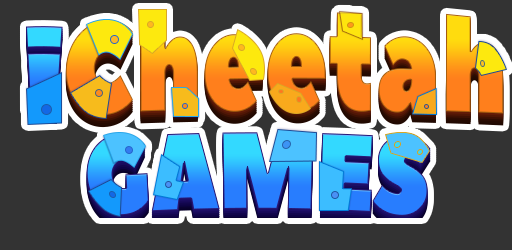
<style>
.page{position:relative;width:512px;height:250px;background:#333333}
.page>*{position:absolute;margin:0}
.t1{font:123.7px "PeaceSans";scale:0.83 1}
.t2{font:109.7px "PeaceSans";letter-spacing:-0.025em;scale:0.81 1}
</style>
<div class="page">
<p class="t1" style="left:65px;top:12px;width:439px;height:104px">Cheetah</p>
<p class="t2" style="left:25px;top:26px;width:38px;height:86px">i</p>
<p class="t2" style="left:86px;top:132px;width:345px;height:84px">GAMES</p>
</div>
